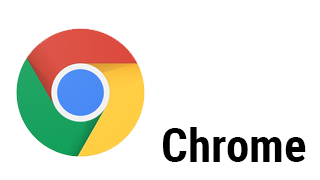
<style>
.page{position:relative;width:320px;height:180px;background:#ffffff}
.page>*{position:absolute;margin:0}
.t1{font:47px "RobotoCondensed-Bold";color:#000000}
</style>
<div class="page">
<p class="t1" style="left:163px;top:127px;width:143px;height:35px">Chrome</p>
</div>
